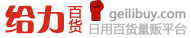
<style>
.page{position:relative;width:191px;height:38px;background:#ffffff}
.page>*{position:absolute;margin:0}
.t1{font:30px "FZCQK--GBK1-0";color:#d52a1e;font-weight:bold}
.t2{font:14px/14px "MicrosoftYaHei";color:#d52a1e;font-weight:bold}
.t3{font:12px "MicrosoftYaHei";color:#a0a0a0;font-weight:bold}
.t4{font:12px "MicrosoftYaHei";color:#b6b6b6;font-weight:bold}
</style>
<div class="page">
<p class="t1" style="left:5px;top:5px;width:59px;height:29px">给力</p>
<p class="t2" style="left:68px;top:6px;width:15px;height:27px">百<br>货</p>
<p class="t3" style="left:109px;top:8px;width:77px;height:14px">geilibuy.com</p>
<p class="t4" style="left:89px;top:22px;width:98px;height:13px">日用百货量贩平台</p>
</div>
